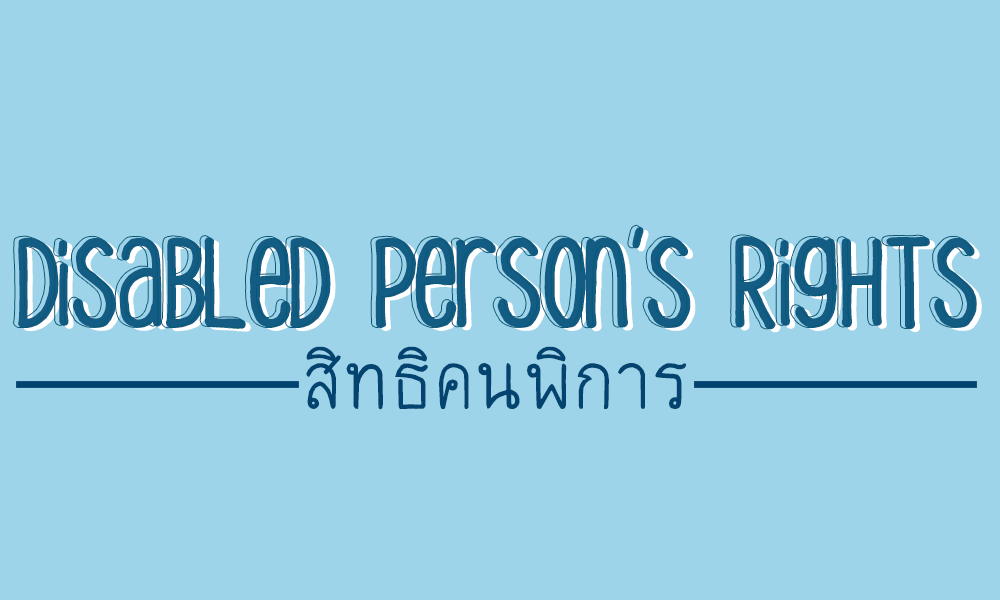
<style>
.page{position:relative;width:1000px;height:600px;background:#9dd4e9}
.page>*{position:absolute;margin:0}
.t1{font:116px "Dreamy-Land-Medium"}
.t2{font:116px "Dreamy-Land-Medium";color:#135c84}
.t3{font:116px "2005_iannnnnHBO";color:#03436f}
</style>
<div class="page">
<p class="t1" style="left:14px;top:225px;width:959px;height:104px">Disabled Person's Rights</p>
<p class="t2" style="left:18px;top:226px;width:959px;height:104px">Disabled Person's Rights</p>
<p class="t3" style="left:306px;top:346px;width:381px;height:64px">สิทธิคนพิการ</p>
</div>
